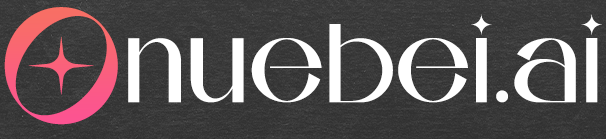
<style>
.page{position:relative;width:606px;height:139px}
.page>*{position:absolute;margin:0}
.t1{font:166.9px "AMORIARegular";color:#fa617b;scale:1.13 1}
.t2{font:111.6px "AMORIARegular";color:#ffffff}
</style>
<div class="page">
<p class="t1" style="left:4px;top:7px;width:114px;height:118px">O</p>
<p class="t2" style="left:128px;top:14px;width:474px;height:89px">nuebei.ai</p>
</div>
